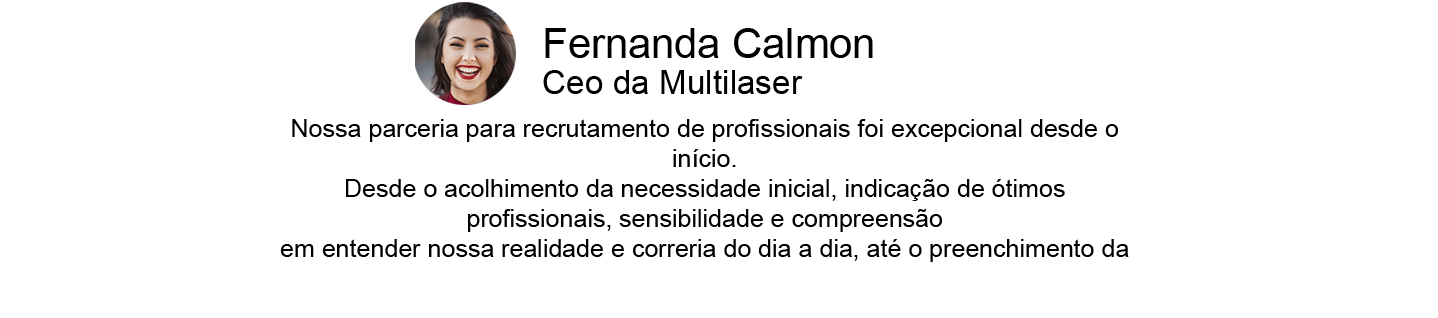
<style>
.page{position:relative;width:1438px;height:318px;background:#ffffff}
.page>*{position:absolute;margin:0}
.t1{font:41.7px "ArialMT";color:#000000}
.t2{font:33.3px "ArialMT";color:#000000}
.t3{font:25px "ArialMT";color:#000000}
</style>
<div class="page">
<p class="t1" style="left:545px;top:28px;width:328px;height:30px">Fernanda Calmon</p>
<p class="t2" style="left:543px;top:70px;width:260px;height:24px">Ceo da Multilaser</p>
<p class="t3" style="left:280px;top:119px;width:849px;height:143px;text-align:center">Nossa parceria para recrutamento de profissionais foi excepcional desde o início.<br>Desde o acolhimento da necessidade inicial, indicação de ótimos profissionais, sensibilidade e compreensão<br>em entender nossa realidade e correria do dia a dia, até o preenchimento da oportunidade e abertura de novas vagas,<br>sempre foi uma parceria muito cuidadosa, responsável e respeitosa. Com profissionais capacitados em nos atender, a<br>Visionnaire sempre nos ajudou.</p>
</div>
